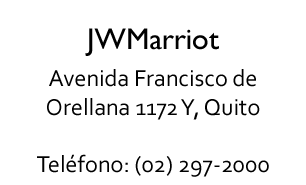
<style>
.page{position:relative;width:306px;height:185px;background:#ffffff}
.page>*{position:absolute;margin:0}
.t1{font:30px "GillSansMT";color:#000000}
.t2{font:24px "Corbel";color:#000000}
</style>
<div class="page">
<p class="t1" style="left:85px;top:28px;width:134px;height:28px">JWMarriot</p>
<p class="t2" style="left:37px;top:69px;width:232px;height:108px;text-align:center">Avenida Francisco de <br>Orellana 1172 Y, Quito <br><br>Teléfono: (02) 297-2000</p>
</div>
